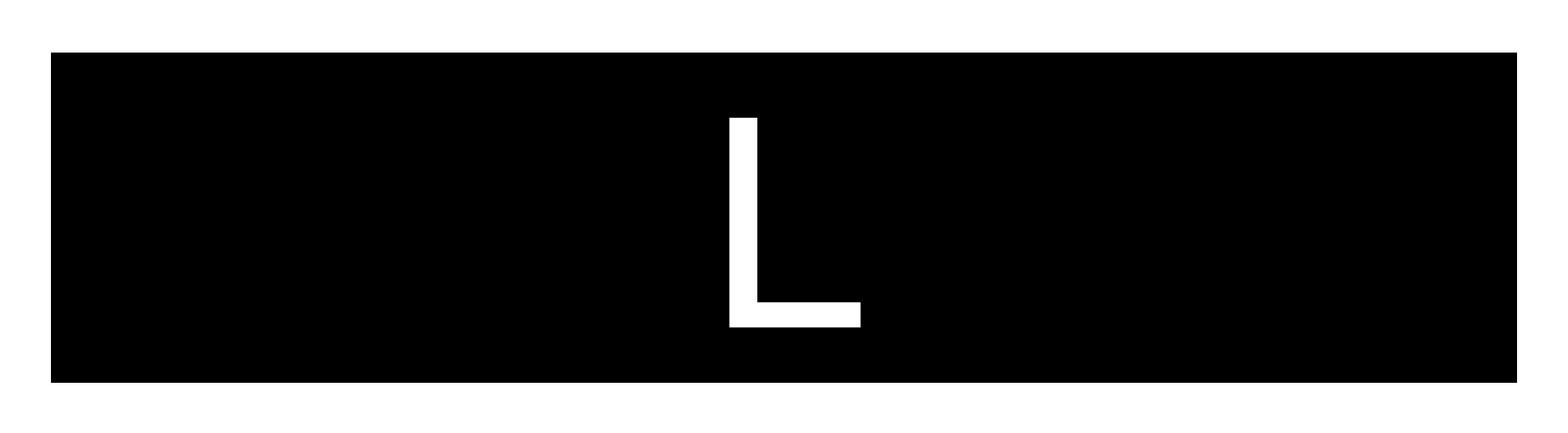
<style>
.page{position:relative;width:1568px;height:433px;background:#000000}
.page>*{position:absolute;margin:0}
.t1{font:292.1px "ArialMT";color:#ffffff}
</style>
<div class="page">
<p class="t1" style="left:729px;top:118px;width:132px;height:210px">L</p>
</div>
